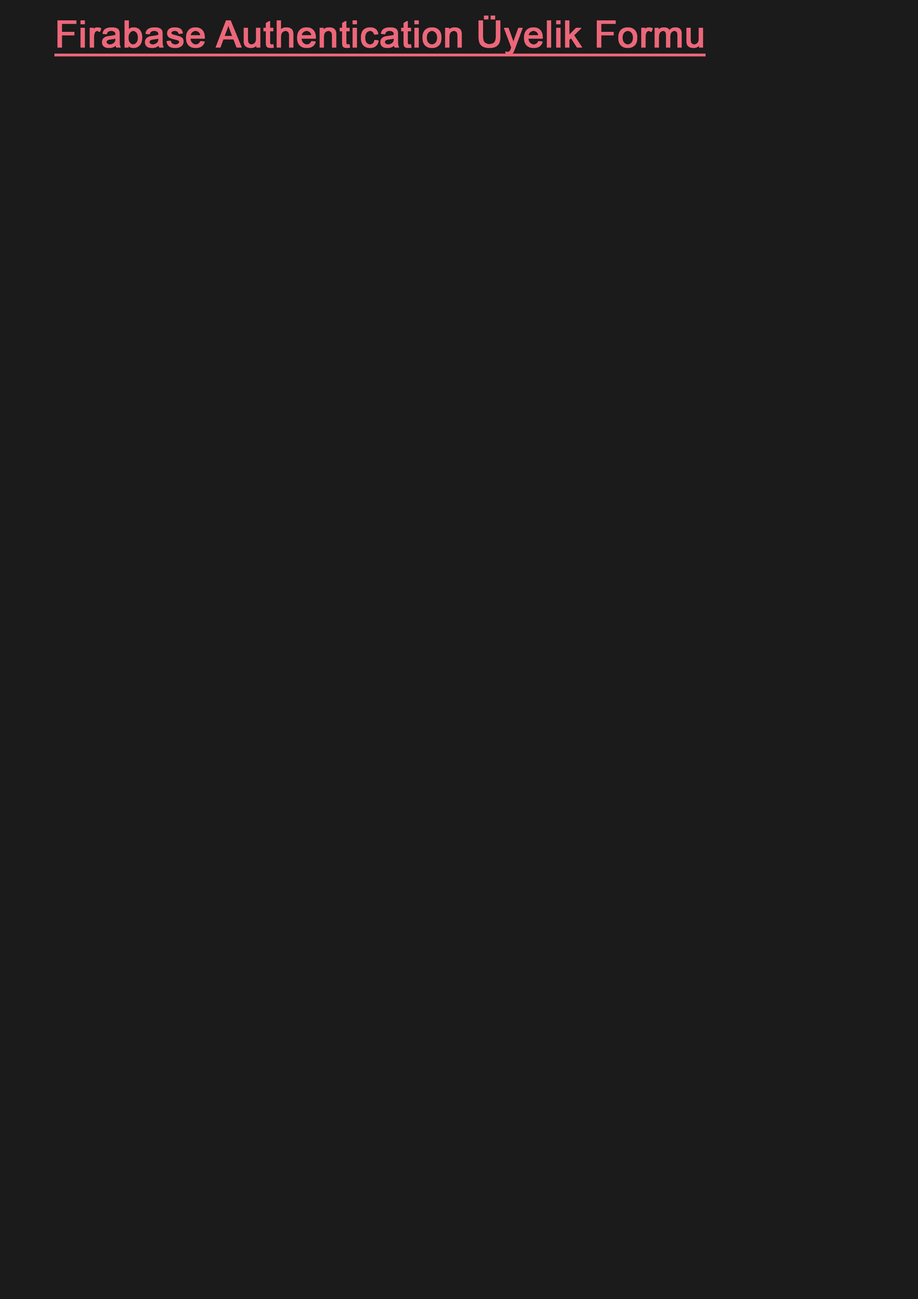
<style>
.page{position:relative;width:918px;height:1299px;background:#1b1b1b}
.page>*{position:absolute;margin:0}
.t1{font:37px "ArialMT";color:#ec677a;font-weight:bold;text-decoration:underline}
</style>
<div class="page">
<p class="t1" style="left:54px;top:16px;width:652px;height:41px">Firabase Authentication Üyelik Formu</p>
</div>
